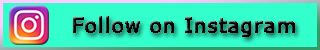
<style>
.page{position:relative;width:320px;height:50px;background:#33ffcc}
.page>*{position:absolute;margin:0}
.t1{font:20px "Verdana";color:#000000;font-weight:bold}
</style>
<div class="page">
<p class="t1" style="left:73px;top:16px;width:222px;height:21px">Follow on Instagram</p>
</div>
